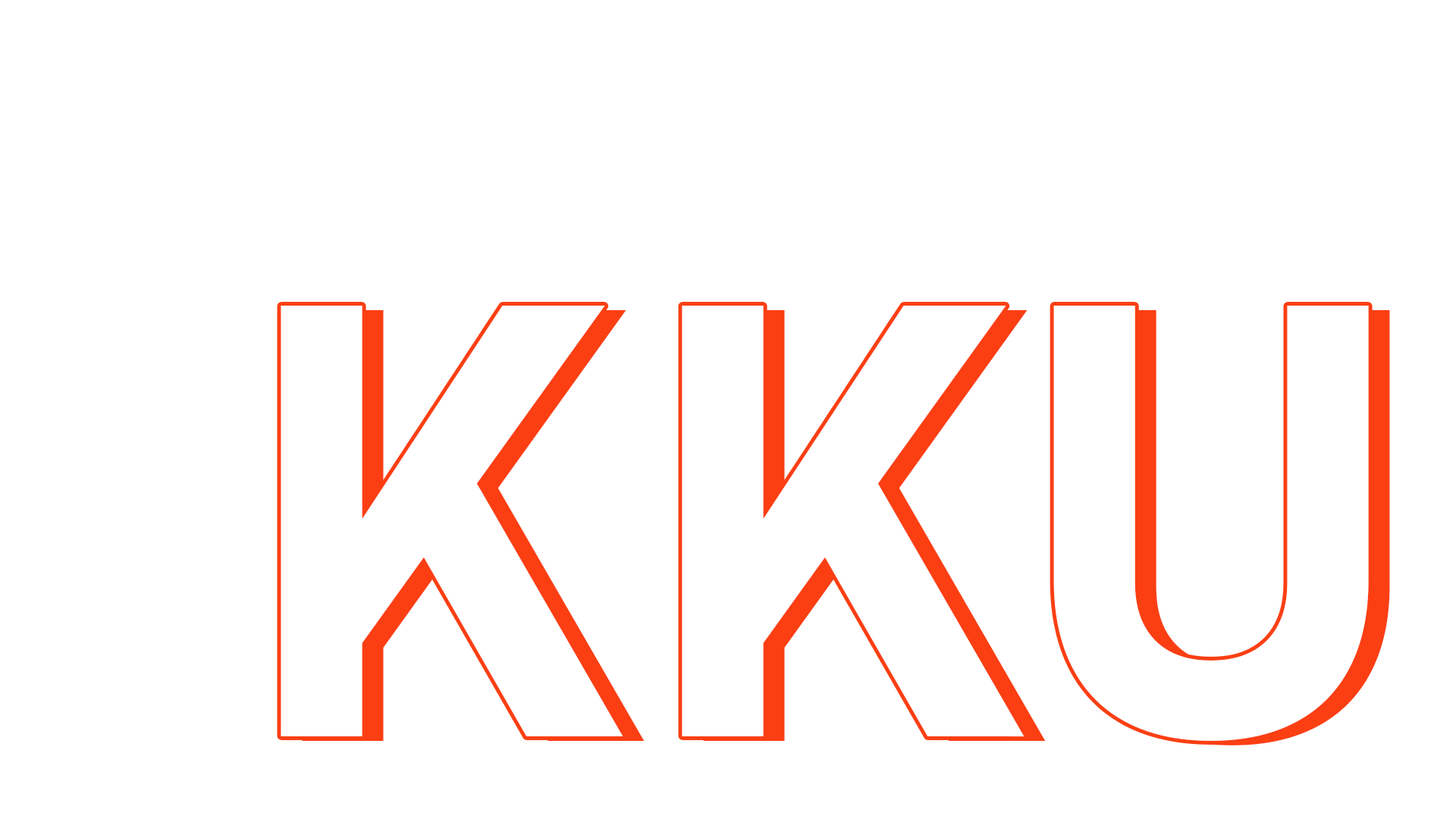
<style>
.page{position:relative;width:1456px;height:819px;background:#ffffff}
.page>*{position:absolute;margin:0}
.t1{font:606.7px "Bahnschrift-Bold";letter-spacing:0.01em;color:#ffffff}
</style>
<div class="page">
<p class="t1" style="left:281px;top:306px;width:1088px;height:435px">KKU</p>
</div>
